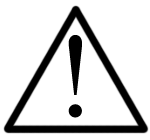
<style>
.page{position:relative;width:150px;height:140px;background:#ffffff}
.page>*{position:absolute;margin:0}
.t1{font:119px "TimesNewRomanPSMT";color:#000000}
</style>
<div class="page">
<p class="t1" style="left:68px;top:35px;width:14px;height:83px">!</p>
</div>
